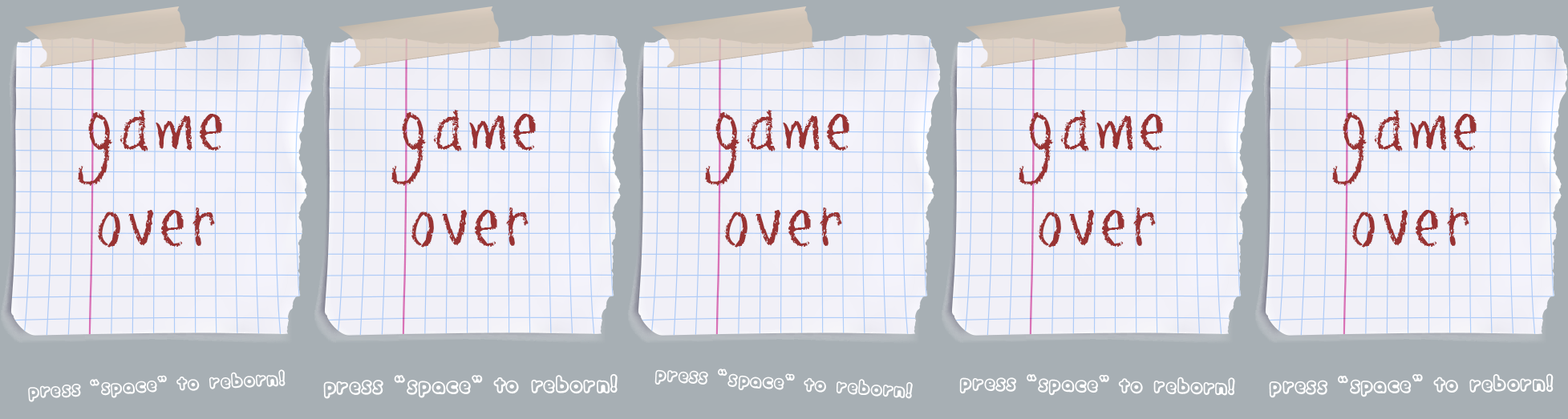
<style>
.page{position:relative;width:1568px;height:419px;background:#a7afb4}
.page>*{position:absolute;margin:0}
.t1{font:20.1px "mini-convenie";color:#ffffff}
.t2{font:22.9px "mini-convenie";color:#ffffff}
.t3{font:21.4px "mini-convenie";color:#ffffff}
.t4{font:22.1px "mini-convenie";color:#ffffff}
</style>
<div class="page">
<p class="t1" style="left:28px;top:370px;width:258px;height:33px;rotate:-3deg">press“space”to reborn!</p>
<p class="t2" style="left:323px;top:374px;width:295px;height:25px">press“space”to reborn!</p>
<p class="t1" style="left:654px;top:369px;width:259px;height:30px;rotate:4deg">press“space”to reborn!</p>
<p class="t3" style="left:959px;top:375px;width:276px;height:21px;rotate:1deg">press“space”to reborn!</p>
<p class="t4" style="left:1269px;top:374px;width:285px;height:25px;rotate:-1deg">press“space”to reborn!</p>
</div>
